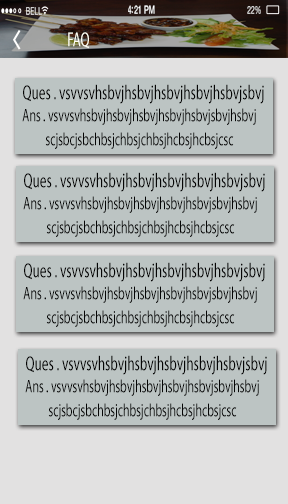
<style>
.page{position:relative;width:288px;height:504px;background:#bcc4c3}
.page>*{position:absolute;margin:0}
.t1{font:11.4px "HelveticaNeue-Medium";letter-spacing:-0.02em;color:#ffffff;scale:0.62 1}
.t2{font:11px "HelveticaNeue";letter-spacing:-0.02em;scale:0.62 1}
.t3{font:10.5px "HelveticaNeue";letter-spacing:0.02em;scale:0.62 1}
.t4{font:20.3px "MyriadPro-Regular";color:#fffff5;scale:0.65 1}
.t5{font:20.3px "MyriadPro-Regular";color:#050505;scale:0.65 1}
.t6{font:18px/24px "MyriadPro-Regular";color:#050505;scale:0.65 1}
</style>
<div class="page">
<p class="t1" style="left:128px;top:5px;width:27px;height:9px">4:21 PM</p>
<p class="t2" style="left:247px;top:6px;width:14px;height:8px">22%</p>
<p class="t3" style="left:26px;top:7px;width:16px;height:8px">BELL</p>
<p class="t4" style="left:68px;top:32px;width:21px;height:17px">FAQ</p>
<p class="t5" style="left:23px;top:84px;width:241px;height:20px">Ques . vsvvsvhsbvjhsbvjhsbvjhsbvjhsbvjsbvj</p>
<p class="t6" style="left:22px;top:108px;width:234px;height:41px;text-align:center">Ans . vsvvsvhsbvjhsbvjhsbvjhsbvjhsbvjsbvjhsbvj<br>scjsbcjsbchbsjchbsjchbsjhcbsjhcbsjcsc</p>
<p class="t5" style="left:24px;top:172px;width:241px;height:20px">Ques . vsvvsvhsbvjhsbvjhsbvjhsbvjhsbvjsbvj</p>
<p class="t6" style="left:23px;top:196px;width:234px;height:41px;text-align:center">Ans . vsvvsvhsbvjhsbvjhsbvjhsbvjhsbvjsbvjhsbvj<br>scjsbcjsbchbsjchbsjchbsjhcbsjhcbsjcsc</p>
<p class="t5" style="left:24px;top:262px;width:241px;height:20px">Ques . vsvvsvhsbvjhsbvjhsbvjhsbvjhsbvjsbvj</p>
<p class="t6" style="left:23px;top:286px;width:234px;height:41px;text-align:center">Ans . vsvvsvhsbvjhsbvjhsbvjhsbvjhsbvjsbvjhsbvj<br>scjsbcjsbchbsjchbsjchbsjhcbsjhcbsjcsc</p>
<p class="t5" style="left:26px;top:355px;width:241px;height:20px">Ques . vsvvsvhsbvjhsbvjhsbvjhsbvjhsbvjsbvj</p>
<p class="t6" style="left:25px;top:379px;width:234px;height:41px;text-align:center">Ans . vsvvsvhsbvjhsbvjhsbvjhsbvjhsbvjsbvjhsbvj<br>scjsbcjsbchbsjchbsjchbsjhcbsjhcbsjcsc</p>
</div>
